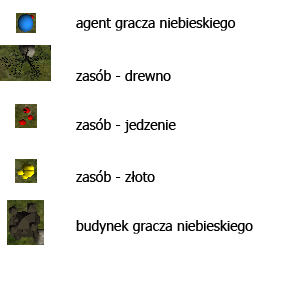
<style>
.page{position:relative;width:300px;height:300px;background:#ffffff}
.page>*{position:absolute;margin:0}
.t1{font:14px "Tahoma";color:#000000}
</style>
<div class="page">
<p class="t1" style="left:76px;top:17px;width:160px;height:14px">agent gracza niebieskiego</p>
<p class="t1" style="left:76px;top:69px;width:95px;height:12px">zasób - drewno</p>
<p class="t1" style="left:76px;top:118px;width:100px;height:15px">zasób - jedzenie</p>
<p class="t1" style="left:76px;top:170px;width:79px;height:12px">zasób - złoto</p>
<p class="t1" style="left:76px;top:220px;width:177px;height:14px">budynek gracza niebieskiego</p>
</div>
